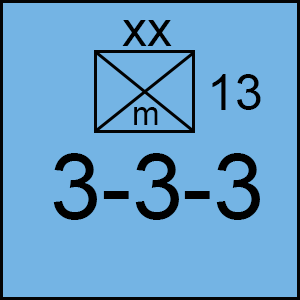
<style>
.page{position:relative;width:300px;height:300px;background:#74b4e4}
.page>*{position:absolute;margin:0}
.t1{font:50px "ArialMT";color:#000000}
.t2{font:33.3px "ArialMT";color:#000000}
.t3{font:91.7px "ArialMT";color:#000000}
</style>
<div class="page">
<p class="t1" style="left:122px;top:20px;width:50px;height:26px">xx</p>
<p class="t1" style="left:212px;top:74px;width:49px;height:36px">13</p>
<p class="t2" style="left:134px;top:107px;width:24px;height:18px">m</p>
<p class="t3" style="left:53px;top:153px;width:207px;height:67px">3-3-3</p>
</div>
